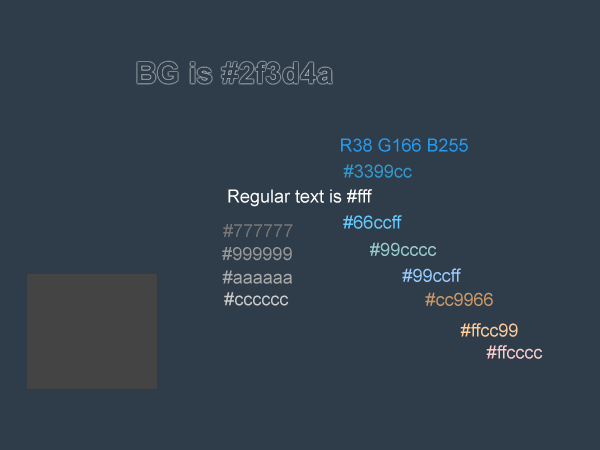
<style>
.page{position:relative;width:600px;height:450px;background:#2f3d4a}
.page>*{position:absolute;margin:0}
.t1{font:18px "ArialMT";color:#2699eb}
.t2{font:18px "ArialMT";color:#3399cc}
.t3{font:18px "ArialMT";color:#ffffff}
.t4{font:18px "ArialMT";color:#66ccff}
.t5{font:18px "ArialMT";color:#777777}
.t6{font:18px "ArialMT";color:#99cccc}
.t7{font:18px "ArialMT";color:#999999}
.t8{font:18px "ArialMT";color:#aaaaaa}
.t9{font:18px "ArialMT";color:#99ccff}
.t10{font:18px "ArialMT";color:#cccccc}
.t11{font:18px "ArialMT";color:#cc9966}
.t12{font:18px "ArialMT";color:#ffcc99}
.t13{font:18px "ArialMT";color:#ffcccc}
</style>
<div class="page">
<p class="t1" style="left:341px;top:138px;width:127px;height:14px">R38 G166 B255</p>
<p class="t2" style="left:343px;top:164px;width:69px;height:14px">#3399cc</p>
<p class="t3" style="left:228px;top:189px;width:144px;height:18px">Regular text is #fff</p>
<p class="t4" style="left:343px;top:215px;width:59px;height:14px">#66ccff</p>
<p class="t5" style="left:223px;top:224px;width:70px;height:13px">#777777</p>
<p class="t6" style="left:370px;top:242px;width:67px;height:14px">#99cccc</p>
<p class="t7" style="left:222px;top:247px;width:70px;height:14px">#999999</p>
<p class="t8" style="left:222px;top:270px;width:70px;height:14px">#aaaaaa</p>
<p class="t9" style="left:402px;top:268px;width:59px;height:14px">#99ccff</p>
<p class="t10" style="left:224px;top:292px;width:65px;height:14px">#cccccc</p>
<p class="t11" style="left:425px;top:292px;width:68px;height:14px">#cc9966</p>
<p class="t12" style="left:460px;top:323px;width:58px;height:14px">#ffcc99</p>
<p class="t13" style="left:486px;top:345px;width:57px;height:14px">#ffcccc</p>
</div>
